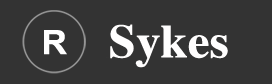
<style>
.page{position:relative;width:272px;height:84px;background:#333333}
.page>*{position:absolute;margin:0}
.t1{font:33.6px "Arial-BoldMT";color:#ffffff;scale:1.04 1}
.t2{font:47px "Times-Bold";color:#fffefe;scale:1.04 1}
</style>
<div class="page">
<p class="t1" style="left:44px;top:30px;width:23px;height:25px">R</p>
<p class="t2" style="left:110px;top:24px;width:118px;height:44px">Sykes</p>
</div>
